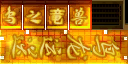
<style>
.page{position:relative;width:128px;height:64px}
.page>*{position:absolute;margin:0}
.t1{font:17.9px "SJlingyunzhangcao";scale:1.12 1}
.t2{font:24px "SJlingyunzhangcao"}
.t3{font:17px "Otsutome_font-Bold";font-style:italic}
.t4{font:18px "JXC";font-weight:bold}
.t5{font:27px/27px "JXC";font-weight:bold;font-style:italic}
</style>
<div class="page">
<p class="t1" style="left:4px;top:6px;width:12px;height:19px">鸟</p>
<p class="t2" style="left:27px;top:10px;width:14px;height:14px">之</p>
<p class="t3" style="left:50px;top:8px;width:15px;height:17px;rotate:3deg">竜</p>
<p class="t4" style="left:71px;top:7px;width:16px;height:18px">兽</p>
<p class="t5" style="left:12px;top:35px;width:107px;height:25px;rotate:90deg">鸟<br>龙<br>运<br>送</p>
</div>
